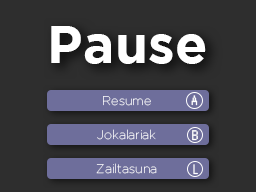
<style>
.page{position:relative;width:256px;height:192px;background:#2e2e2e}
.page>*{position:absolute;margin:0}
.t1{font:53.3px "Gotham-Bold";color:#ffffff}
.t2{font:12.5px "Gotham-Thin";color:#ffffff}
.t3{font:16.7px "Nintendo-DS-BIOS";color:#ffffff}
.t4{font:17.2px "Nintendo-DS-BIOS";color:#ffffff}
</style>
<div class="page">
<p class="t1" style="left:51px;top:26px;width:155px;height:38px">Pause</p>
<p class="t2" style="left:103px;top:96px;width:48px;height:10px">Resume</p>
<p class="t3" style="left:191px;top:95px;width:7px;height:11px">A</p>
<p class="t2" style="left:97px;top:129px;width:59px;height:11px">Jokalariak</p>
<p class="t4" style="left:192px;top:130px;width:6px;height:11px">B</p>
<p class="t2" style="left:96px;top:163px;width:61px;height:11px">Zailtasuna</p>
<p class="t3" style="left:193px;top:164px;width:5px;height:11px">L</p>
</div>
